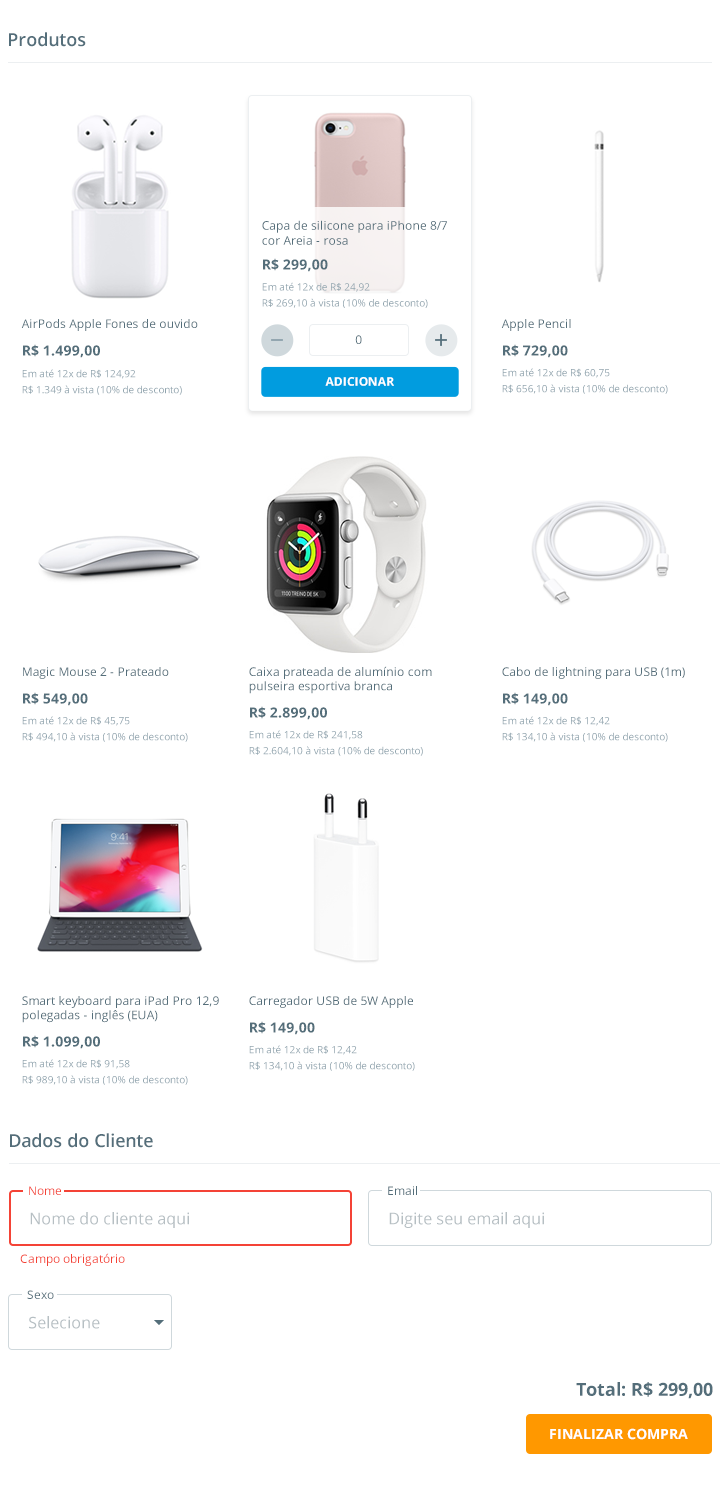
<style>
.page{position:relative;width:720px;height:1486px;background:#ffffff}
.page>*{position:absolute;margin:0}
.t1{font:18px "OpenSans-SemiBold";color:#546e7a}
.t2{font:12px/15px "OpenSans";color:#546e7a}
.t3{font:14px "OpenSans-Bold";color:#546e7a}
.t4{font:10px/16px "OpenSans";color:#90a4ae}
.t5{font:12px "OpenSans";color:#546e7a}
.t6{font:12px "OpenSans-Bold";color:#ffffff;text-transform:uppercase}
.t7{font:12px "OpenSans";color:#f44336}
.t8{font:16px "OpenSans";color:#b6bfc3}
.t9{font:18px "OpenSans-Bold";color:#546e7a}
.t10{font:14px "OpenSans-Bold";color:#ffffff;text-transform:uppercase}
</style>
<div class="page">
<p class="t1" style="left:9px;top:32px;width:77px;height:15px">Produtos</p>
<p class="t2" style="left:262px;top:220px;width:185px;height:25px">Capa de silicone para iPhone 8/7<br>cor Areia - rosa</p>
<p class="t3" style="left:263px;top:258px;width:65px;height:14px">R$ 299,00</p>
<p class="t4" style="left:262px;top:282px;width:166px;height:26px">Em até 12x de R$ 24,92<br>R$ 269,10 à vista (10% de desconto)</p>
<p class="t5" style="left:21px;top:319px;width:177px;height:12px">AirPods Apple Fones de ouvido</p>
<p class="t5" style="left:501px;top:319px;width:70px;height:12px">Apple Pencil</p>
<p class="t5" style="left:355px;top:335px;width:7px;height:9px">0</p>
<p class="t3" style="left:23px;top:344px;width:77px;height:14px">R$ 1.499,00</p>
<p class="t3" style="left:503px;top:344px;width:65px;height:14px">R$ 729,00</p>
<p class="t4" style="left:22px;top:369px;width:160px;height:26px">Em até 12x de R$ 124,92<br>R$ 1.349 à vista (10% de desconto)</p>
<p class="t6" style="left:325px;top:377px;width:69px;height:9px">adicionar</p>
<p class="t4" style="left:502px;top:368px;width:166px;height:26px">Em até 12x de R$ 60,75<br>R$ 656,10 à vista (10% de desconto)</p>
<p class="t5" style="left:23px;top:667px;width:146px;height:12px">Magic Mouse 2 - Prateado</p>
<p class="t5" style="left:249px;top:666px;width:183px;height:28px">Caixa prateada de alumínio com<br>pulseira esportiva branca</p>
<p class="t5" style="left:502px;top:667px;width:183px;height:12px">Cabo de lightning para USB (1m)</p>
<p class="t3" style="left:23px;top:692px;width:65px;height:14px">R$ 549,00</p>
<p class="t3" style="left:503px;top:692px;width:65px;height:14px">R$ 149,00</p>
<p class="t3" style="left:250px;top:706px;width:77px;height:14px">R$ 2.899,00</p>
<p class="t4" style="left:22px;top:716px;width:166px;height:26px">Em até 12x de R$ 45,75<br>R$ 494,10 à vista (10% de desconto)</p>
<p class="t4" style="left:502px;top:716px;width:166px;height:26px">Em até 12x de R$ 12,42<br>R$ 134,10 à vista (10% de desconto)</p>
<p class="t4" style="left:249px;top:730px;width:174px;height:26px">Em até 12x de R$ 241,58<br>R$ 2.604,10 à vista (10% de desconto)</p>
<p class="t5" style="left:22px;top:996px;width:197px;height:27px">Smart keyboard para iPad Pro 12,9<br>polegadas - inglês (EUA)</p>
<p class="t5" style="left:249px;top:996px;width:164px;height:12px">Carregador USB de 5W Apple</p>
<p class="t3" style="left:250px;top:1021px;width:65px;height:14px">R$ 149,00</p>
<p class="t3" style="left:23px;top:1035px;width:77px;height:14px">R$ 1.099,00</p>
<p class="t4" style="left:249px;top:1045px;width:166px;height:26px">Em até 12x de R$ 12,42<br>R$ 134,10 à vista (10% de desconto)</p>
<p class="t4" style="left:22px;top:1059px;width:166px;height:26px">Em até 12x de R$ 91,58<br>R$ 989,10 à vista (10% de desconto)</p>
<p class="t1" style="left:10px;top:1133px;width:143px;height:15px">Dados do Cliente</p>
<p class="t7" style="left:29px;top:1186px;width:32px;height:9px">Nome</p>
<p class="t5" style="left:388px;top:1186px;width:29px;height:9px">Email</p>
<p class="t8" style="left:30px;top:1212px;width:159px;height:16px">Nome do cliente aqui</p>
<p class="t8" style="left:389px;top:1212px;width:155px;height:16px">Digite seu email aqui</p>
<p class="t7" style="left:20px;top:1253px;width:105px;height:13px">Campo obrigatório</p>
<p class="t5" style="left:27px;top:1290px;width:27px;height:9px">Sexo</p>
<p class="t8" style="left:29px;top:1316px;width:71px;height:13px">Selecione</p>
<p class="t9" style="left:576px;top:1382px;width:137px;height:17px">Total: R$ 299,00</p>
<p class="t10" style="left:550px;top:1428px;width:138px;height:12px">finalizar compra</p>
</div>
